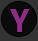
<style>
.page{position:relative;width:38px;height:41px;background:#0b0b0b}
.page>*{position:absolute;margin:0}
.t1{font:31.7px "MyanmarText-Bold";color:#8e2c86}
</style>
<div class="page">
<p class="t1" style="left:10px;top:9px;width:20px;height:23px">Y</p>
</div>
